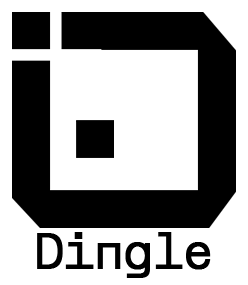
<style>
.page{position:relative;width:248px;height:285px;background:#ffffff}
.page>*{position:absolute;margin:0}
.t1{font:50px "Orbit-Regular";letter-spacing:-0.025em;color:#000000;font-weight:bold}
</style>
<div class="page">
<p class="t1" style="left:37px;top:232px;width:174px;height:46px">Dingle</p>
</div>
